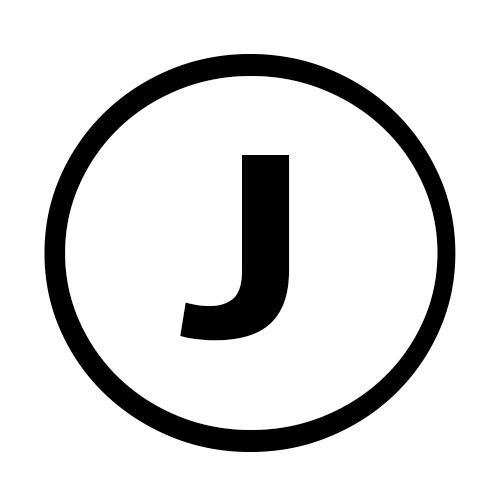
<style>
.page{position:relative;width:500px;height:500px;background:#ffffff}
.page>*{position:absolute;margin:0}
.t1{font:433.8px "TINspirekeys";color:#000000;scale:1.03 1}
</style>
<div class="page">
<p class="t1" style="left:44px;top:54px;width:412px;height:398px">J</p>
</div>
